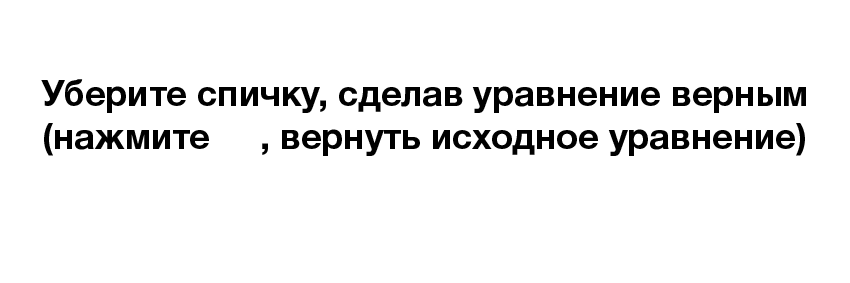
<style>
.page{position:relative;width:850px;height:283px;background:#ffffff}
.page>*{position:absolute;margin:0}
.t1{font:36px "HelveticaNeueCyr-Bold";color:#000000}
</style>
<div class="page">
<p class="t1" style="left:41px;top:79px;width:765px;height:77px;text-align:center">Уберите спичку, сделав уравнение верным<br>(нажмите     , вернуть исходное уравнение)</p>
</div>
